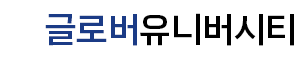
<style>
.page{position:relative;width:300px;height:60px;background:#ffffff}
.page>*{position:absolute;margin:0}
.t1{font:35px "GamtanRoad-Dotum-Bold";color:#000000}
.t2{font:35px "GamtanRoad-Dotum-Bold";color:#1b3b86}
</style>
<div class="page">
<p class="t1" style="left:45px;top:13px;width:249px;height:33px"><span class="t2">글로버</span>유니버시티</p>
</div>
